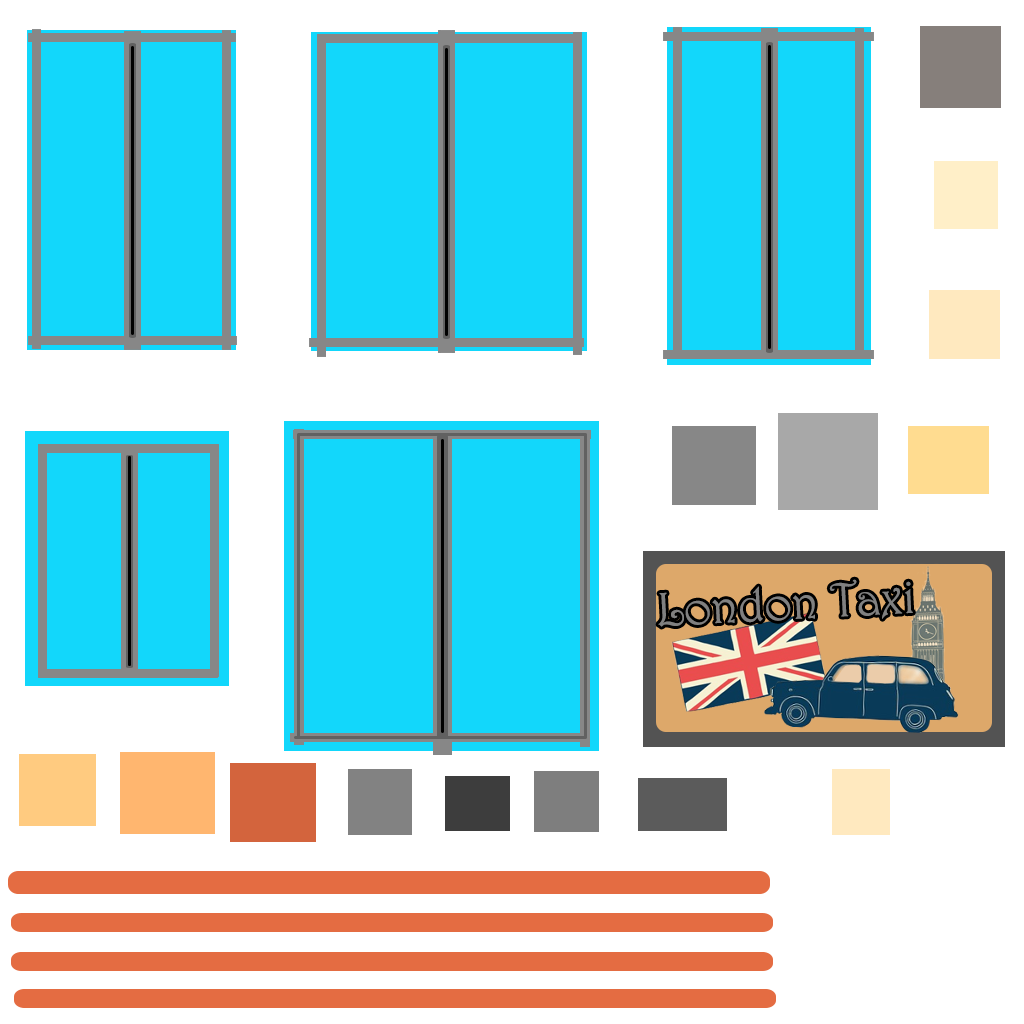
<style>
.page{position:relative;width:1024px;height:1024px;background:#ffffff}
.page>*{position:absolute;margin:0}
.t1{font:48px "Harrington";color:#808080}
</style>
<div class="page">
<p class="t1" style="left:658px;top:579px;width:255px;height:48px;rotate:-3deg">London Taxi</p>
</div>
